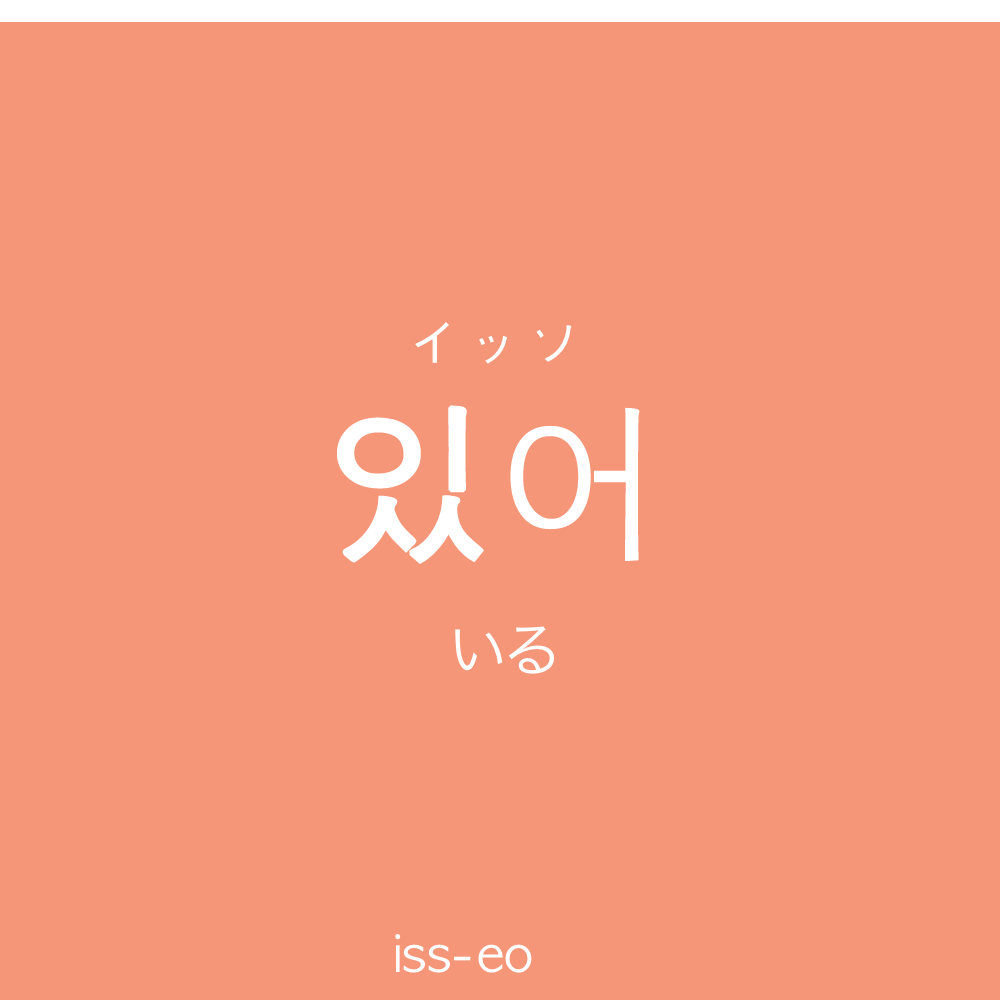
<style>
.page{position:relative;width:1000px;height:1000px;background:#f69679}
.page>*{position:absolute;margin:0}
.t1{font:60px "AppleGothic";color:#ffffff}
.t2{font:170px "AppleGothic";color:#ffffff;font-weight:bold}
.t3{font:60px "HiraKakuProN-W3";color:#ffffff}
.t4{font:50px "AppleGothic";color:#ffffff}
</style>
<div class="page">
<p class="t1" style="left:415px;top:322px;width:157px;height:42px">イッソ</p>
<p class="t2" style="left:337px;top:405px;width:303px;height:159px">있어</p>
<p class="t3" style="left:455px;top:626px;width:100px;height:48px">いる</p>
<p class="t4" style="left:395px;top:934px;width:137px;height:39px">iss-eo</p>
</div>
